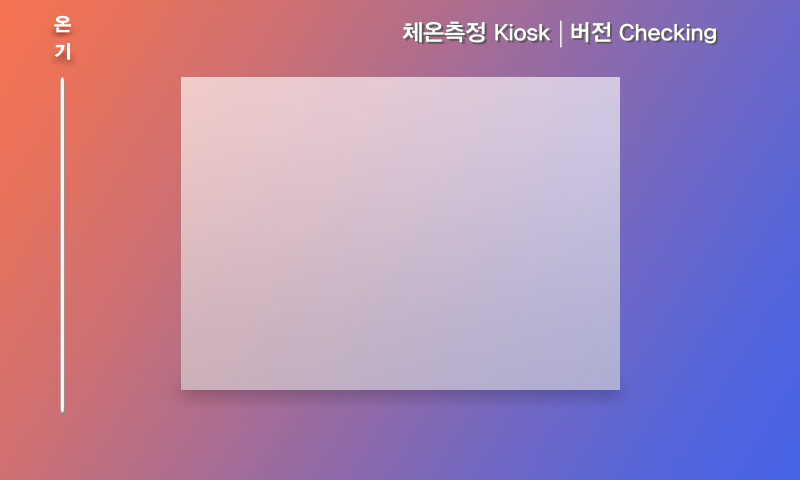
<style>
.page{position:relative;width:800px;height:480px}
.page>*{position:absolute;margin:0}
.t1{font:18.9px/26.5px "YDIYGO360";letter-spacing:-0.006em;color:#ffffff}
.t2{font:22.9px "YDIYGO340";letter-spacing:-0.006em;color:#ffffff}
.t3{font:22.9px "YDIYGO340";letter-spacing:-0.006em}
</style>
<div class="page">
<p class="t1" style="left:54px;top:15px;width:18px;height:45px">온<br>기</p>
<p class="t2" style="left:402px;top:21px;width:149px;height:22px">체온측정 Kiosk</p>
<p class="t3" style="left:405px;top:23px;width:148px;height:22px">체온측정 Kiosk</p>
<p class="t2" style="left:571px;top:22px;width:145px;height:22px">버전 Checking</p>
<p class="t3" style="left:573px;top:24px;width:145px;height:22px">버전 Checking</p>
</div>
